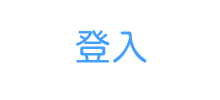
<style>
.page{position:relative;width:220px;height:100px;background:#ffffff}
.page>*{position:absolute;margin:0}
.t1{font:37.5px "jf-openhuninn-1.1";color:#3f9eff}
</style>
<div class="page">
<p class="t1" style="left:76px;top:30px;width:71px;height:33px">登入</p>
</div>
